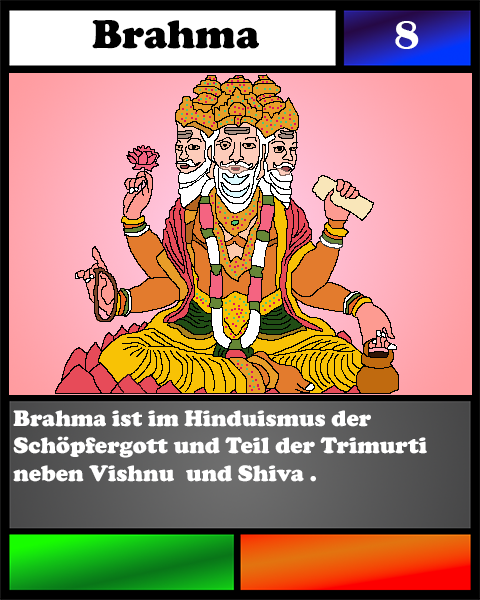
<style>
.page{position:relative;width:480px;height:600px}
.page>*{position:absolute;margin:0}
.t1{font:41.7px "CooperBlack";color:#000000}
.t2{font:41.7px "BritannicBold";color:#ffffff}
.t3{font:23.1px "CooperBlack";color:#ffffff}
</style>
<div class="page">
<p class="t1" style="left:92px;top:20px;width:167px;height:29px">Brahma</p>
<p class="t2" style="left:395px;top:21px;width:24px;height:28px">8</p>
<p class="t3" style="left:13px;top:410px;width:414px;height:72px">Brahma ist im Hinduismus der Schöpfergott und Teil der Trimurti <br>neben Vishnu  und Shiva .</p>
</div>
